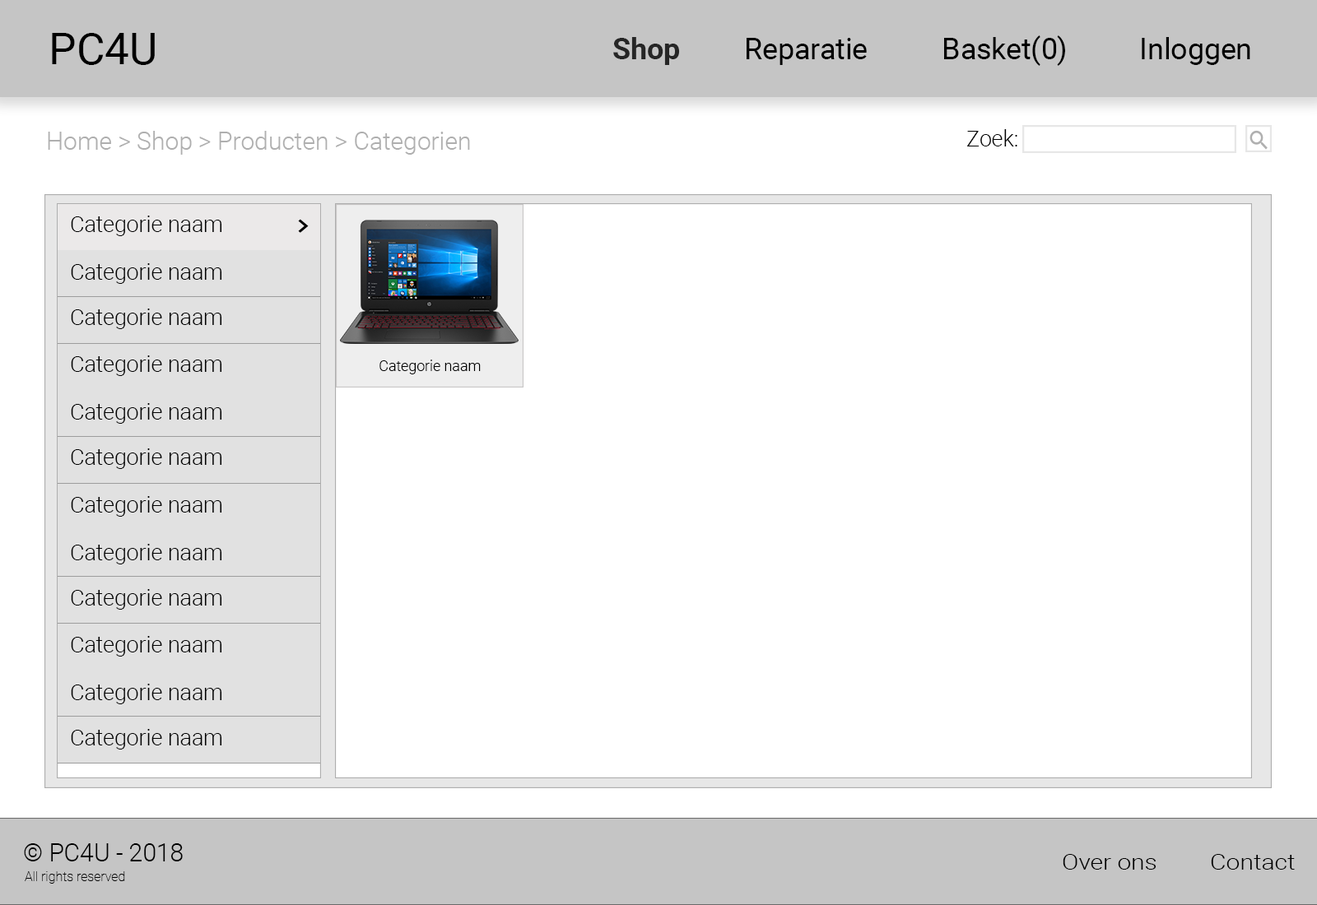
<style>
.page{position:relative;width:1317px;height:905px;background:#ffffff}
.page>*{position:absolute;margin:0}
.t1{font:43.9px "Roboto-Regular";color:#000000}
.t2{font:29.3px "Roboto-Regular";color:#000000}
.t3{font:29.3px "Roboto-Bold";color:#262626}
.t4{font:24.7px "Roboto-Light";color:#afafaf}
.t5{font:21.9px "Roboto-Light";color:#000000}
.t6{font:14.6px "Roboto-Light";color:#000000}
.t7{font:24.7px "Roboto-Light";color:#000000}
.t8{font:21.3px "Roboto-Light";color:#000000;scale:1.16 1}
.t9{font:13.2px "Roboto-Thin";color:#000000}
</style>
<div class="page">
<p class="t1" style="left:52px;top:33px;width:103px;height:32px">PC4U</p>
<p class="t2" style="left:613px;top:35px;width:637px;height:31px"><span class="t3">Shop</span>  Reparatie   Basket(0)   Inloggen</p>
<p class="t4" style="left:48px;top:131px;width:422px;height:24px">Home &gt; Shop &gt; Producten &gt; Categorien</p>
<p class="t5" style="left:967px;top:129px;width:50px;height:18px">Zoek:</p>
<p class="t5" style="left:71px;top:216px;width:151px;height:20px">Categorie naam</p>
<p class="t5" style="left:71px;top:263px;width:151px;height:21px">Categorie naam</p>
<p class="t5" style="left:71px;top:309px;width:151px;height:20px">Categorie naam</p>
<p class="t5" style="left:71px;top:356px;width:151px;height:20px">Categorie naam</p>
<p class="t6" style="left:379px;top:360px;width:102px;height:15px">Categorie naam</p>
<p class="t5" style="left:71px;top:403px;width:151px;height:21px">Categorie naam</p>
<p class="t5" style="left:71px;top:449px;width:151px;height:20px">Categorie naam</p>
<p class="t5" style="left:71px;top:496px;width:151px;height:21px">Categorie naam</p>
<p class="t5" style="left:71px;top:544px;width:151px;height:21px">Categorie naam</p>
<p class="t5" style="left:71px;top:589px;width:151px;height:21px">Categorie naam</p>
<p class="t5" style="left:71px;top:636px;width:151px;height:21px">Categorie naam</p>
<p class="t5" style="left:71px;top:684px;width:151px;height:21px">Categorie naam</p>
<p class="t5" style="left:71px;top:729px;width:151px;height:21px">Categorie naam</p>
<p class="t7" style="left:24px;top:844px;width:159px;height:18px">© PC4U - 2018</p>
<p class="t8" style="left:1063px;top:854px;width:232px;height:16px">Over ons  Contact</p>
<p class="t9" style="left:25px;top:872px;width:100px;height:12px">All rights reserved</p>
</div>
